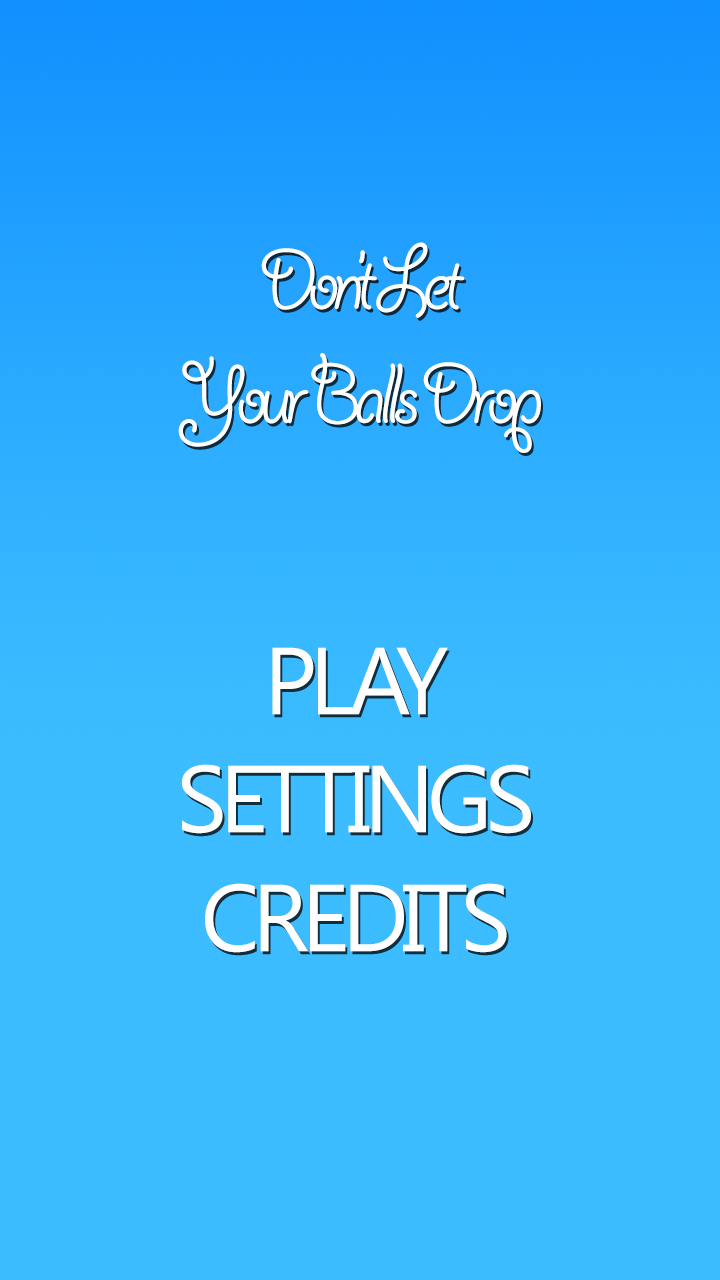
<style>
.page{position:relative;width:720px;height:1280px;background:#3cbcff}
.page>*{position:absolute;margin:0}
.t1{font:95px "GiddyupStd";letter-spacing:-0.08em;color:#ffffff}
.t2{font:95px "KhmerUI";letter-spacing:-0.08em;color:#ffffff}
</style>
<div class="page">
<p class="t1" style="left:178px;top:242px;width:363px;height:211px;text-align:center">Don’t Let<br>Your Balls Drop</p>
<p class="t2" style="left:272px;top:647px;width:176px;height:68px">PLAY</p>
<p class="t2" style="left:182px;top:764px;width:349px;height:70px">SETTINGS</p>
<p class="t2" style="left:205px;top:883px;width:302px;height:70px">CREDITS</p>
</div>
